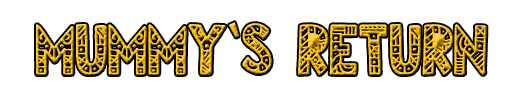
<style>
.page{position:relative;width:508px;height:112px;background:#ffffff}
.page>*{position:absolute;margin:0}
.t1{font:72px "Egyptian-Nights"}
.t2{font:72px "LithosPro-Regular"}
</style>
<div class="page">
<p class="t1" style="left:36px;top:24px;width:451px;height:51px">mummy    return</p>
<p class="t2" style="left:229px;top:22px;width:43px;height:52px">‘ <span class="t1">s</span></p>
</div>
